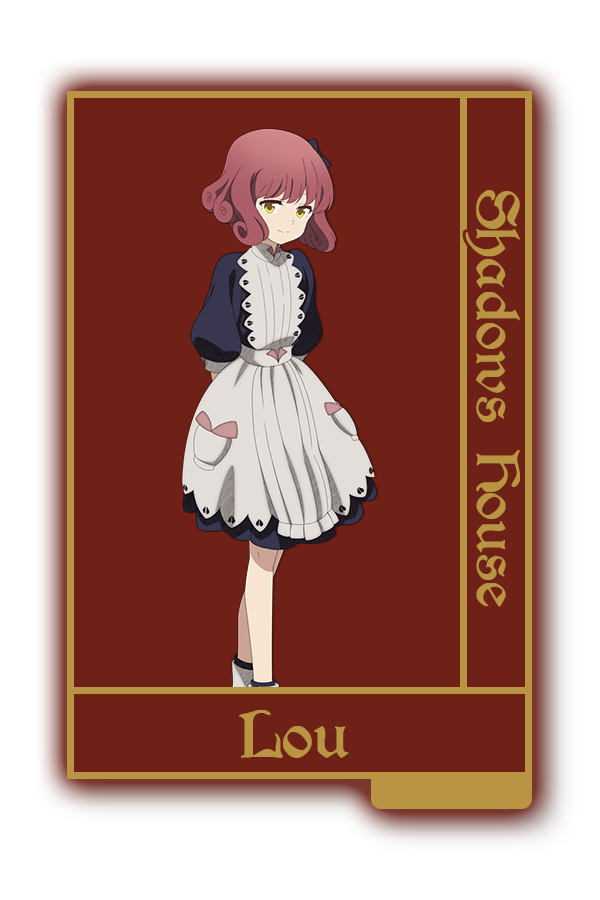
<style>
.page{position:relative;width:600px;height:900px;background:#6f2117}
.page>*{position:absolute;margin:0}
.t1{font:67.9px "Augusta-Regular";color:#b89443}
.t2{font:75px "Augusta-Regular";color:#b89443}
</style>
<div class="page">
<p class="t1" style="left:465px;top:190px;width:55px;height:417px;rotate:90deg">Shadows House</p>
<p class="t2" style="left:239px;top:710px;width:110px;height:48px">Lou</p>
</div>
